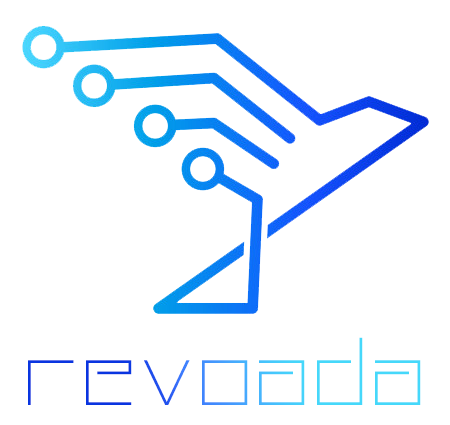
<style>
.page{position:relative;width:450px;height:425px;background:#ffffff}
.page>*{position:absolute;margin:0}
.t1{font:112px "SquaredDisplay";letter-spacing:0.01em}
</style>
<div class="page">
<p class="t1" style="left:28px;top:337px;width:393px;height:68px">REVOADA</p>
</div>
